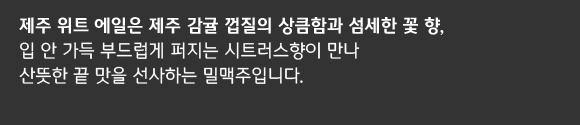
<style>
.page{position:relative;width:580px;height:125px;background:#333333}
.page>*{position:absolute;margin:0}
.t1{font:18px/25px "MICEGothic";color:#ffffff}
.t2{font:18px/25px "MICEGothicBold";color:#ffffff}
</style>
<div class="page">
<p class="t1" style="left:19px;top:17px;width:425px;height:67px"><span class="t2">제주 위트 에일은 제주 감귤 껍질의 상큼함과 섬세한 꽃 향,<br></span>입 안 가득 부드럽게 퍼지는 시트러스향이 만나<br>산뜻한 끝 맛을 선사하는 밀맥주입니다.</p>
</div>
